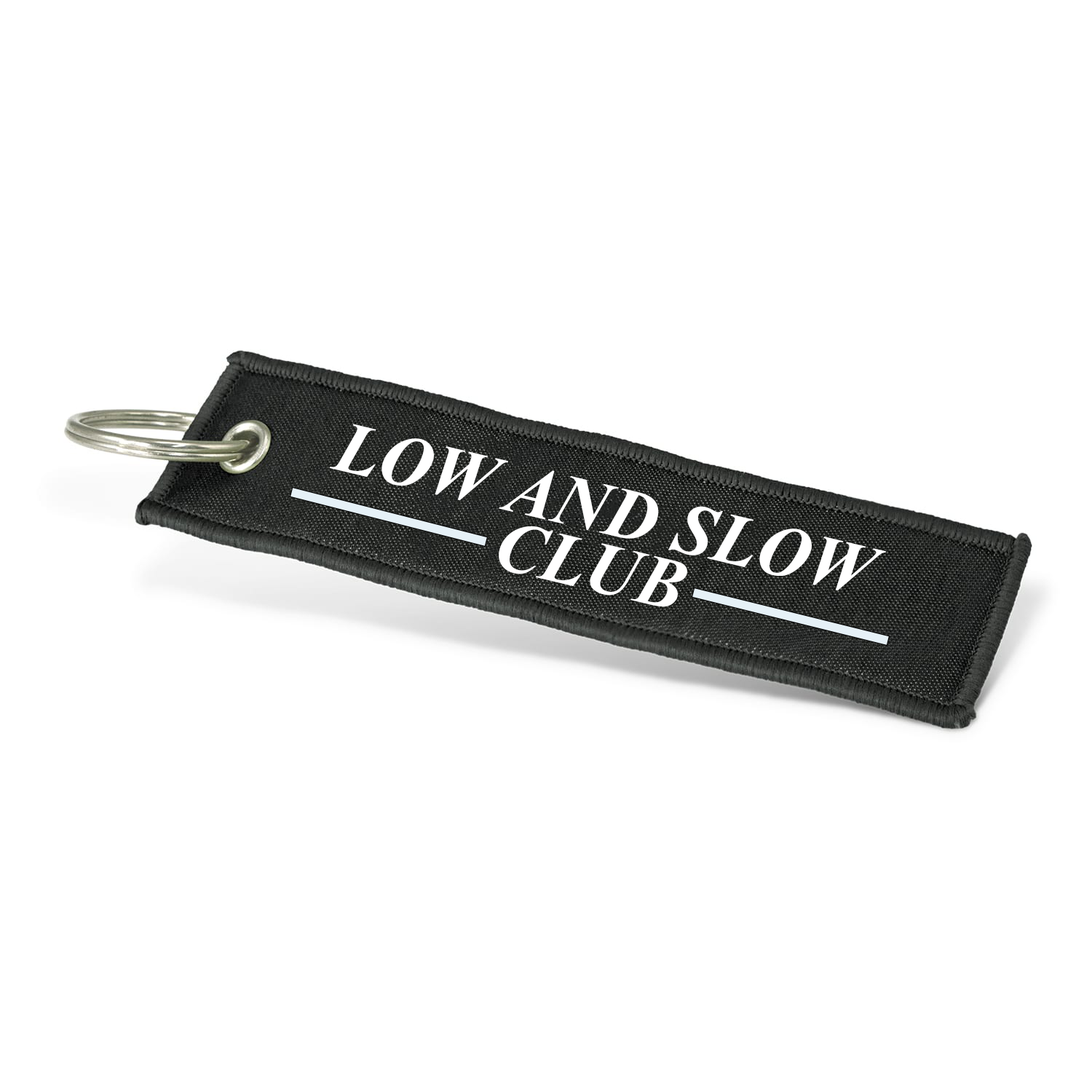
<style>
.page{position:relative;width:1092px;height:1092px;background:#ffffff}
.page>*{position:absolute;margin:0}
.t1{font:72.8px "TimesNewRomanPS-BoldItalicMT";color:#ffffff}
</style>
<div class="page">
<p class="t1" style="left:329px;top:424px;width:557px;height:183px;rotate:13deg">LOW AND SLOW CLUB</p>
</div>
